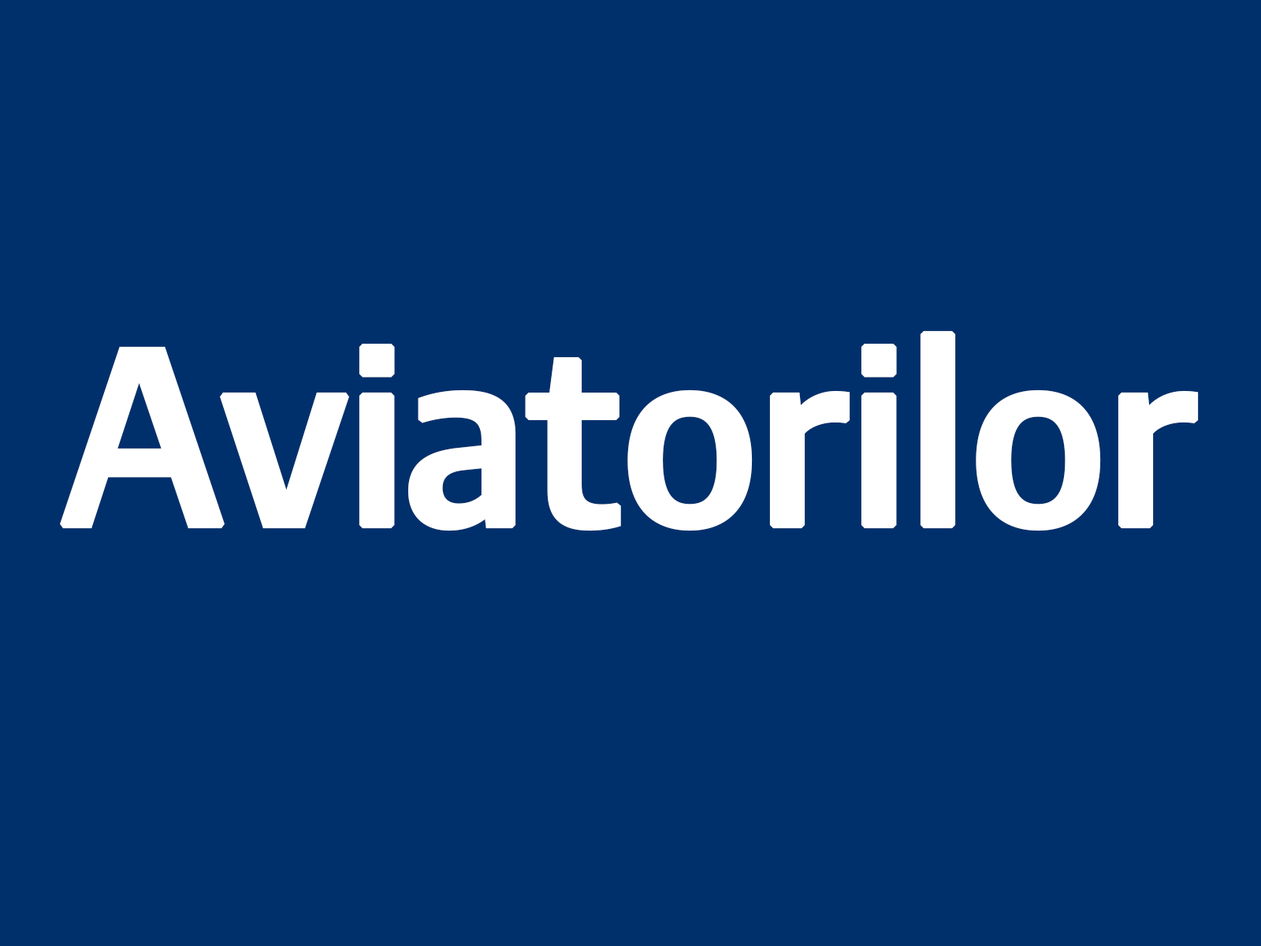
<style>
.page{position:relative;width:1261px;height:946px;background:#00306c}
.page>*{position:absolute;margin:0}
.t1{font:236.4px "SalviaSans-Medium";color:#ffffff;font-weight:bold}
</style>
<div class="page">
<p class="t1" style="left:60px;top:330px;width:1139px;height:201px">Aviatorilor</p>
</div>
